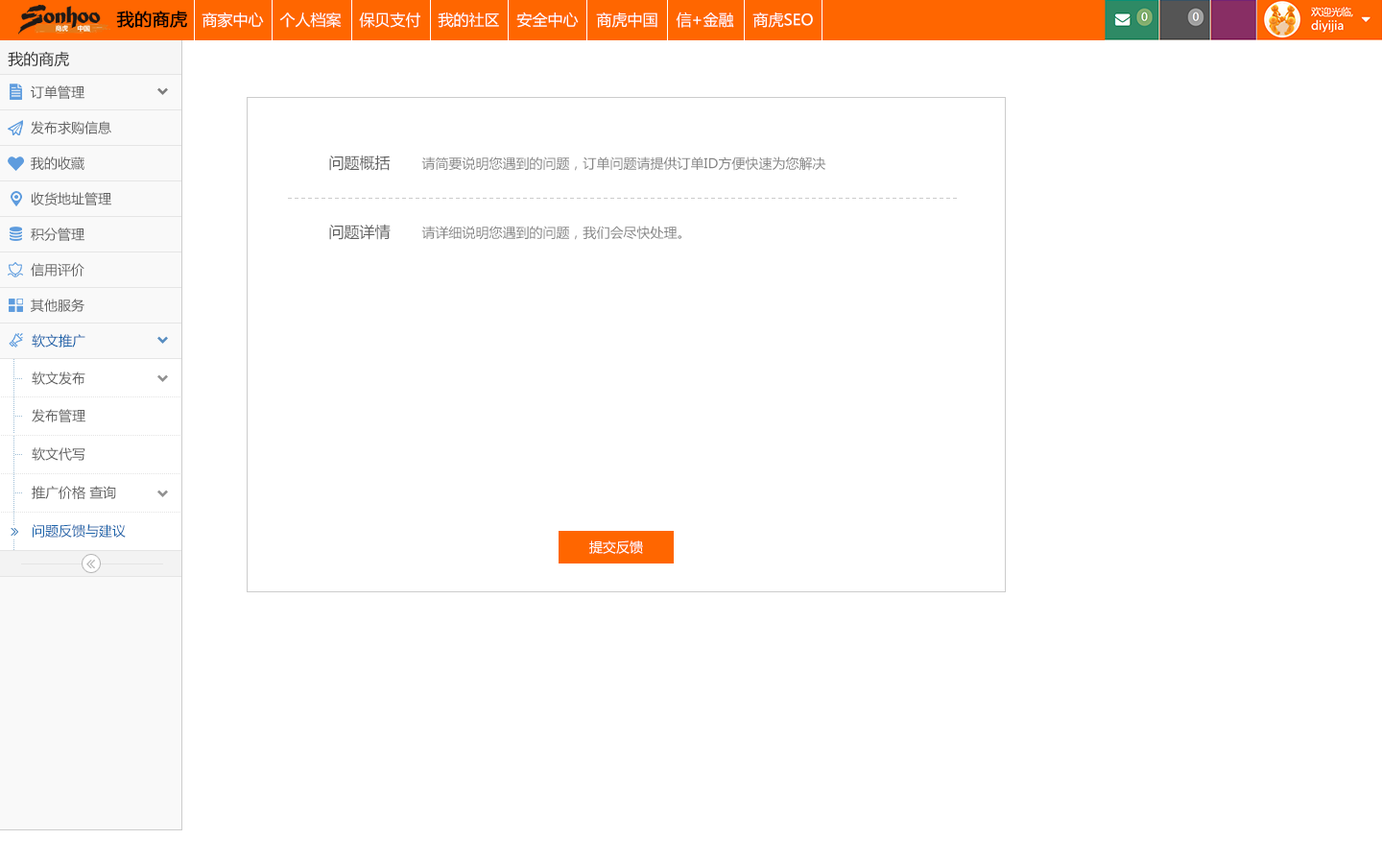
<style>
.page{position:relative;width:1382px;height:863px;background:#ffffff}
.page>*{position:absolute;margin:0}
.t1{font:17.3px "MicrosoftYaHei";color:#000000;font-weight:bold}
.t2{font:15.4px "MicrosoftYaHei";color:#ffffff}
.t3{font:15.4px "MicrosoftYaHei";color:#2d2d2d}
.t4{font:13.4px "MicrosoftYaHei";color:#616161}
.t5{font:13.4px "MicrosoftYaHei";color:#858585}
.t6{font:15.4px "MicrosoftYaHei";color:#616161}
.t7{font:13.4px "MicrosoftYaHei";color:#1963aa}
.t8{font:3.8px "SimSun";color:#9dbdd6}
.t9{font:3.8px "SimSun";color:#e4e4e4}
.t10{font:13.4px "MicrosoftYaHei";color:#ffffff}
</style>
<div class="page">
<p class="t1" style="left:116px;top:11px;width:71px;height:17px">我的商虎</p>
<p class="t2" style="left:202px;top:12px;width:62px;height:16px">商家中心</p>
<p class="t2" style="left:279px;top:12px;width:63px;height:16px">个人档案</p>
<p class="t2" style="left:359px;top:12px;width:61px;height:16px">保贝支付</p>
<p class="t2" style="left:438px;top:12px;width:61px;height:16px">我的社区</p>
<p class="t2" style="left:516px;top:12px;width:63px;height:16px">安全中心</p>
<p class="t2" style="left:596px;top:12px;width:61px;height:16px">商虎中国</p>
<p class="t2" style="left:676px;top:12px;width:58px;height:16px">信+金融</p>
<p class="t2" style="left:752px;top:12px;width:61px;height:16px">商虎SEO</p>
<p class="t3" style="left:8px;top:51px;width:61px;height:16px">我的商虎</p>
<p class="t4" style="left:31px;top:85px;width:53px;height:14px">订单管理</p>
<p class="t4" style="left:31px;top:121px;width:80px;height:13px">发布求购信息</p>
<p class="t4" style="left:31px;top:156px;width:53px;height:14px">我的收藏</p>
<p class="t5" style="left:329px;top:155px;width:497px;height:16px"><span class="t6">问题概括       </span>请简要说明您遇到的问题，订单问题请提供订单ID方便快速为您解决</p>
<p class="t4" style="left:31px;top:192px;width:80px;height:13px">收货地址管理</p>
<p class="t4" style="left:31px;top:227px;width:53px;height:14px">积分管理</p>
<p class="t5" style="left:329px;top:224px;width:352px;height:16px"><span class="t6">问题详情       </span>请详细说明您遇到的问题，我们会尽快处理。</p>
<p class="t4" style="left:31px;top:263px;width:53px;height:13px">信用评价</p>
<p class="t4" style="left:31px;top:298px;width:53px;height:14px">其他服务</p>
<p class="t7" style="left:32px;top:334px;width:53px;height:13px">软文推广</p>
<p class="t8" style="left:13px;top:359px;width:1px;height:26px">..............</p>
<p class="t4" style="left:32px;top:371px;width:53px;height:14px">软文发布</p>
<p class="t8" style="left:13px;top:386px;width:1px;height:47px">.........................</p>
<p class="t8" style="left:15px;top:378px;width:7px;height:1px">....</p>
<p class="t9" style="left:1px;top:396px;width:179px;height:1px">..............................................................................................</p>
<p class="t4" style="left:32px;top:409px;width:53px;height:13px">发布管理</p>
<p class="t8" style="left:15px;top:416px;width:7px;height:1px">....</p>
<p class="t9" style="left:1px;top:435px;width:179px;height:1px">..............................................................................................</p>
<p class="t8" style="left:13px;top:436px;width:1px;height:37px">....................</p>
<p class="t4" style="left:32px;top:447px;width:53px;height:14px">软文代写</p>
<p class="t8" style="left:15px;top:454px;width:7px;height:1px">....</p>
<p class="t9" style="left:1px;top:473px;width:179px;height:1px">..............................................................................................</p>
<p class="t8" style="left:13px;top:474px;width:1px;height:38px">....................</p>
<p class="t4" style="left:32px;top:486px;width:84px;height:13px">推广价格 查询</p>
<p class="t8" style="left:15px;top:492px;width:7px;height:1px">....</p>
<p class="t9" style="left:1px;top:512px;width:179px;height:1px">..............................................................................................</p>
<p class="t8" style="left:13px;top:513px;width:1px;height:12px">.......</p>
<p class="t7" style="left:33px;top:524px;width:93px;height:13px">问题反馈与建议</p>
<p class="t8" style="left:13px;top:539px;width:1px;height:11px">......</p>
<p class="t10" style="left:589px;top:540px;width:54px;height:14px">提交反馈</p>
</div>
